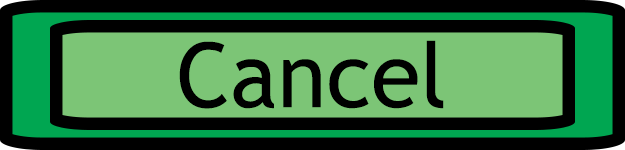
<style>
.page{position:relative;width:625px;height:150px;background:#7cc576}
.page>*{position:absolute;margin:0}
.t1{font:90px "TrebuchetMS";color:#000000}
</style>
<div class="page">
<p class="t1" style="left:179px;top:40px;width:265px;height:69px">Cancel</p>
</div>
